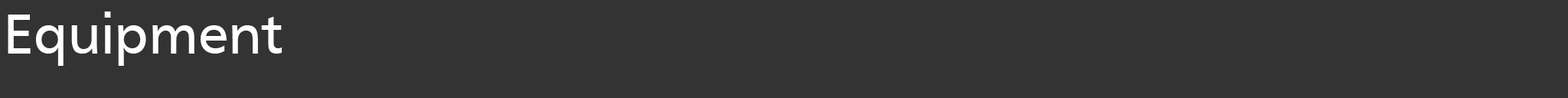
<style>
.page{position:relative;width:1568px;height:98px;background:#333333}
.page>*{position:absolute;margin:0}
.t1{font:58.6px "Frutiger";color:#ffffff}
</style>
<div class="page">
<p class="t1" style="left:8px;top:11px;width:274px;height:55px">Equipment</p>
</div>
